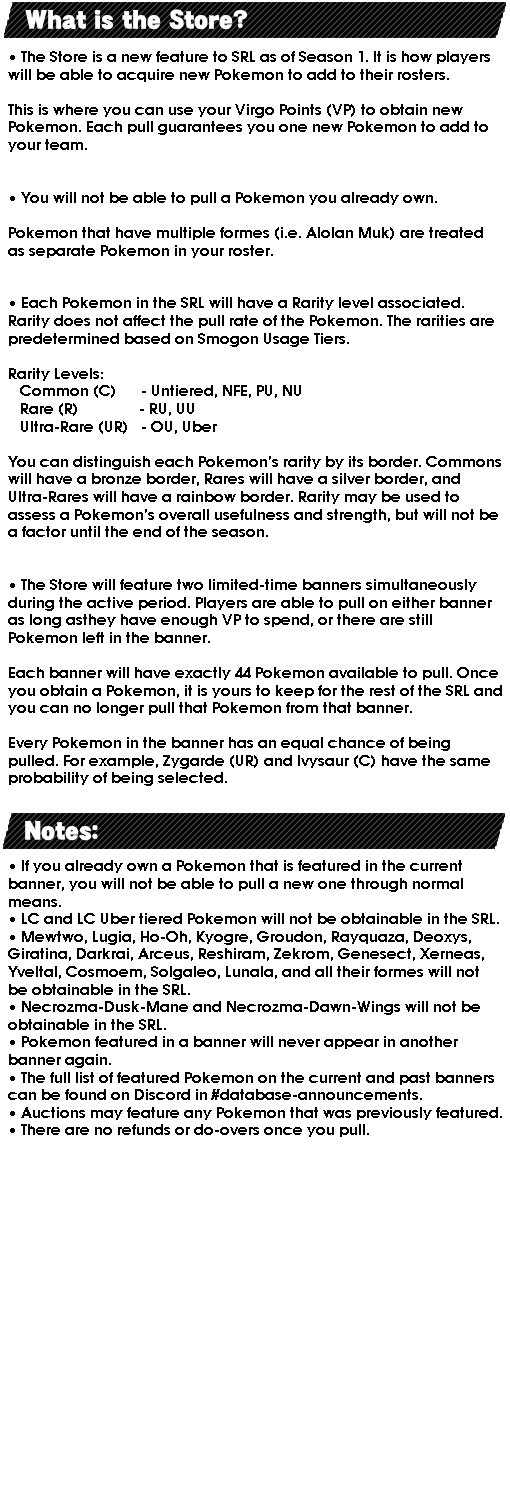
<style>
.page{position:relative;width:510px;height:1500px;background:#ffffff}
.page>*{position:absolute;margin:0}
.t1{font:14.7px "Avalon-Bold";color:#000000}
</style>
<div class="page">
<p class="t1" style="left:8px;top:51px;width:494px;height:1086px;text-align:right">• The Store is a new feature to SRL as of Season 1. It is how players <br>will be able to acquire new Pokemon to add to their rosters.<br><br>This is where you can use your Virgo Points (VP) to obtain new<br>Pokemon. Each pull guarantees you one new Pokemon to add to <br>your team.<br><br><br>• You will not be able to pull a Pokemon you already own.<br><br>Pokemon that have multiple formes (i.e. Alolan Muk) are treated <br>as separate Pokemon in your roster.<br><br><br>• Each Pokemon in the SRL will have a Rarity level associated. <br>Rarity does not affect the pull rate of the Pokemon. The rarities are <br>predetermined based on Smogon Usage Tiers.<br><br>Rarity Levels:<br>   Common (C)      - Untiered, NFE, PU, NU<br>   Rare (R)               - RU, UU<br>   Ultra-Rare (UR)   - OU, Uber<br><br>You can distinguish each Pokemon’s rarity by its border. Commons<br>will have a bronze border, Rares will have a silver border, and<br>Ultra-Rares will have a rainbow border. Rarity may be used to<br>assess a Pokemon’s overall usefulness and strength, but will not be<br>a factor until the end of the season.<br><br><br>• The Store will feature two limited-time banners simultaneously <br>during the active period. Players are able to pull on either banner <br>as long asthey have enough VP to spend, or there are still <br>Pokemon left in the banner.<br><br>Each banner will have exactly 44 Pokemon available to pull. Once<br>you obtain a Pokemon, it is yours to keep for the rest of the SRL and<br>you can no longer pull that Pokemon from that banner.<br><br>Every Pokemon in the banner has an equal chance of being<br>pulled. For example, Zygarde (UR) and Ivysaur (C) have the same<br>probability of being selected.<br><br><br><br><br>• If you already own a Pokemon that is featured in the current <br>banner, you will not be able to pull a new one through normal<br>means.<br>• LC and LC Uber tiered Pokemon will not be obtainable in the SRL.<br>• Mewtwo, Lugia, Ho-Oh, Kyogre, Groudon, Rayquaza, Deoxys,<br>Giratina, Darkrai, Arceus, Reshiram, Zekrom, Genesect, Xerneas,<br>Yveltal, Cosmoem, Solgaleo, Lunala, and all their formes will not<br>be obtainable in the SRL.<br>• Necrozma-Dusk-Mane and Necrozma-Dawn-Wings will not be<br>obtainable in the SRL.<br>• Pokemon featured in a banner will never appear in another<br>banner again.<br>• The full list of featured Pokemon on the current and past banners<br>can be found on Discord in #database-announcements.<br>• Auctions may feature any Pokemon that was previously featured.<br>• There are no refunds or do-overs once you pull.</p>
</div>
